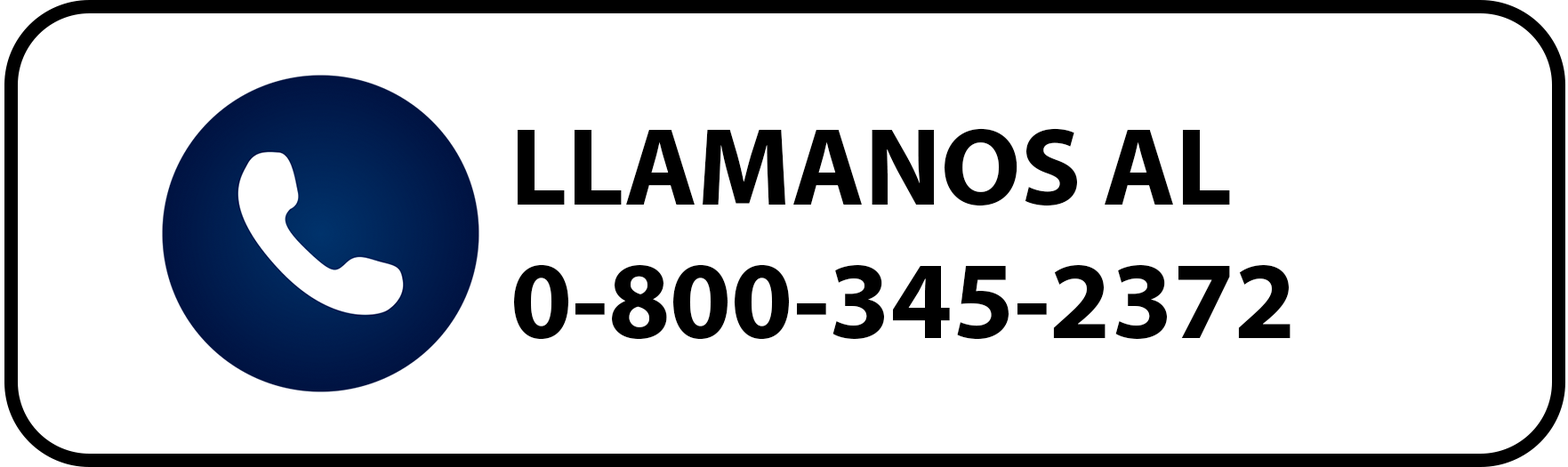
<style>
.page{position:relative;width:1568px;height:467px;background:#ffffff}
.page>*{position:absolute;margin:0}
.t1{font:111.2px "MyriadPro-Bold";color:#000000}
</style>
<div class="page">
<p class="t1" style="left:514px;top:128px;width:777px;height:212px">LLAMANOS AL <br>0-800-345-2372</p>
</div>
